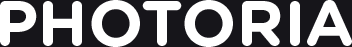
<style>
.page{position:relative;width:352px;height:47px;background:#16151a}
.page>*{position:absolute;margin:0}
.t1{font:65px "GothamRounded-Bold";color:#ffffff}
</style>
<div class="page">
<p class="t1" style="left:0px;top:0px;width:352px;height:47px">PHOTORIA</p>
</div>
